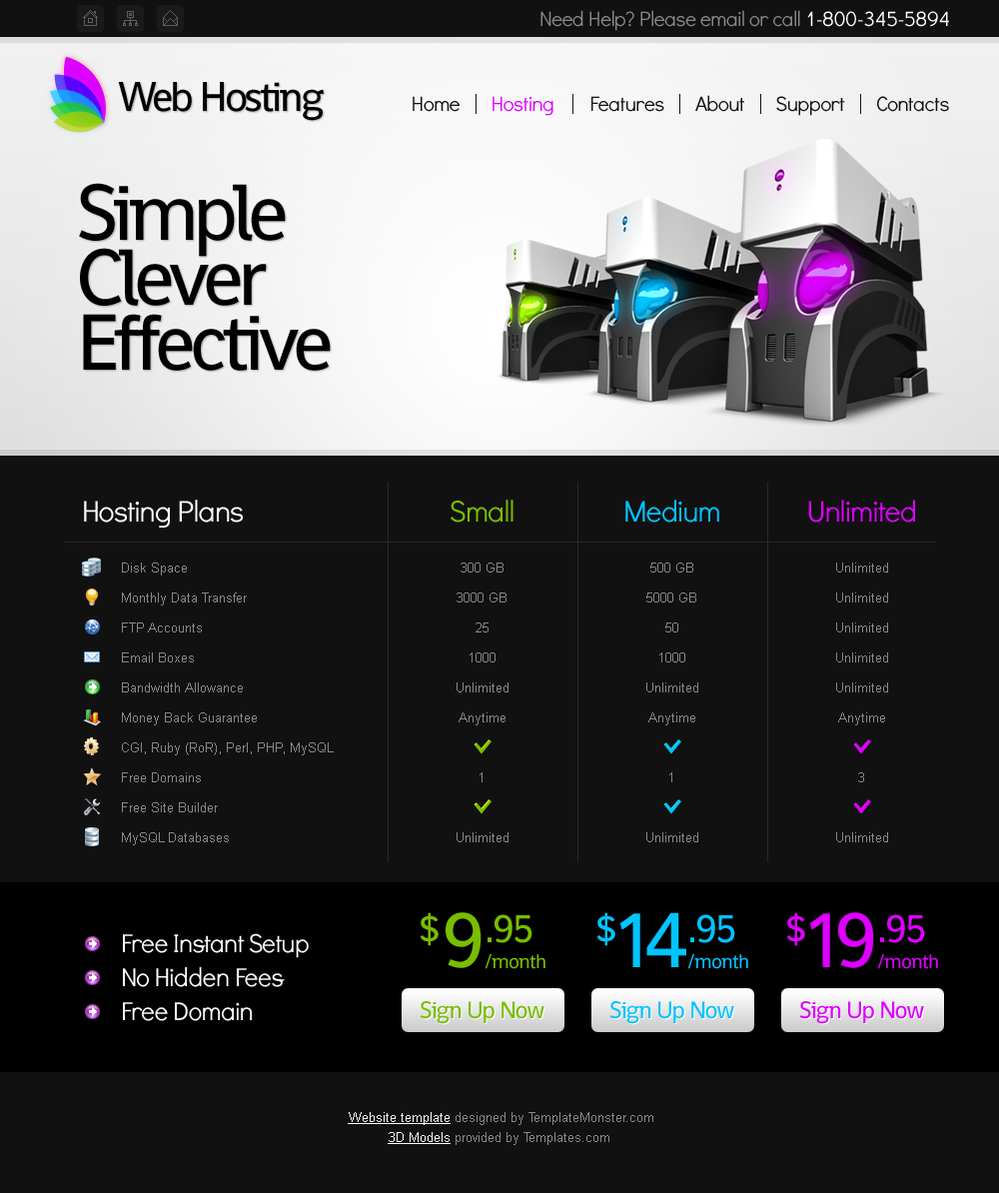
<style>
.page{position:relative;width:999px;height:1193px;background:#111111}
.page>*{position:absolute;margin:0}
.t1{font:21px "DidactGothic";letter-spacing:-0.025em;color:#888888}
.t2{font:21px "DidactGothic";letter-spacing:-0.025em;color:#ffffff}
.t3{font:42px "Shanti";letter-spacing:-0.075em;color:#000000}
.t4{font:21px "DidactGothic";letter-spacing:-0.025em;color:#111111}
.t5{font:21px "DidactGothic";letter-spacing:-0.025em;color:#dd00ff}
.t6{font:79.9px/65px "Shanti";letter-spacing:-0.075em;color:#000000}
.t7{font:30px "DidactGothic";letter-spacing:-0.025em;color:#ffffff}
.t8{font:30px "DidactGothic";letter-spacing:-0.025em;color:#79bd00}
.t9{font:30px "DidactGothic";letter-spacing:-0.025em;color:#01c3fe}
.t10{font:30px "DidactGothic";letter-spacing:-0.025em;color:#dd00ff}
.t11{font:13px/30px "ArialMT";color:#888888}
.t12{font:40px "Shanti";letter-spacing:-0.05em;color:#79bd00}
.t13{font:79.9px "Shanti";letter-spacing:-0.05em;color:#79bd00}
.t14{font:40px "Shanti";letter-spacing:-0.05em;color:#01c3fe}
.t15{font:79.9px "Shanti";letter-spacing:-0.05em;color:#01c3fe}
.t16{font:40px "Shanti";letter-spacing:-0.05em;color:#dd00ff}
.t17{font:79.9px "Shanti";letter-spacing:-0.05em;color:#dd00ff}
.t18{font:26px/34px "DidactGothic";letter-spacing:-0.025em;color:#ffffff}
.t19{font:20px "Shanti";letter-spacing:-0.05em;color:#79bd00}
.t20{font:20px "Shanti";letter-spacing:-0.05em;color:#01c3fe}
.t21{font:20px "Shanti";letter-spacing:-0.05em;color:#dd00ff}
.t22{font:24px "Shanti";letter-spacing:-0.05em;color:#79bd00}
.t23{font:24px "Shanti";letter-spacing:-0.05em;color:#01c3fe}
.t24{font:24px "Shanti";letter-spacing:-0.05em;color:#dd00ff}
.t25{font:13px/20px "ArialMT";color:#888888}
.t26{font:13px/20px "ArialMT";color:#ffffff}
.t27{font:13px/20px "ArialMT";color:#ffffff;text-decoration:underline}
</style>
<div class="page">
<p class="t1" style="left:541px;top:10px;width:408px;height:21px">Need Help? Please email or call <span class="t2">1-800-345-5894</span></p>
<p class="t3" style="left:118px;top:82px;width:206px;height:39px">Web Hosting</p>
<p class="t4" style="left:413px;top:95px;width:536px;height:21px">Home       <span class="t5">Hosting</span>        Features       About       Support       Contacts</p>
<p class="t6" style="left:79px;top:183px;width:252px;height:188px">Simple<br>Clever<br>Effective</p>
<p class="t7" style="left:84px;top:500px;width:159px;height:28px">Hosting Plans</p>
<p class="t8" style="left:451px;top:500px;width:63px;height:23px">Small</p>
<p class="t9" style="left:626px;top:500px;width:94px;height:23px">Medium</p>
<p class="t10" style="left:808px;top:500px;width:107px;height:23px">Unlimited</p>
<p class="t11" style="left:122px;top:563px;width:212px;height:282px">Disk Space<br>Monthly Data Transfer<br>FTP Accounts<br>Email Boxes<br>Bandwidth Allowance<br>Money Back Guarantee<br>CGI, Ruby (RoR), Perl, PHP, MySQL<br>Free Domains<br>Free Site Builder<br>MySQL Databases</p>
<p class="t11" style="left:457px;top:563px;width:52px;height:279px;text-align:center">300 GB<br>3000 GB<br>25<br>1000<br>Unlimited<br>Anytime<br><br>1<br><br>Unlimited</p>
<p class="t11" style="left:647px;top:563px;width:52px;height:279px;text-align:center">500 GB<br>5000 GB<br>50<br>1000<br>Unlimited<br>Anytime<br><br>1<br><br>Unlimited</p>
<p class="t11" style="left:836px;top:563px;width:52px;height:279px;text-align:center">Unlimited<br>Unlimited<br>Unlimited<br>Unlimited<br>Unlimited<br>Anytime<br><br>3<br><br>Unlimited</p>
<p class="t12" style="left:420px;top:912px;width:19px;height:34px">$</p>
<p class="t13" style="left:446px;top:912px;width:36px;height:56px">9</p>
<p class="t12" style="left:488px;top:914px;width:45px;height:29px">.95</p>
<p class="t14" style="left:597px;top:912px;width:19px;height:34px">$</p>
<p class="t15" style="left:620px;top:912px;width:67px;height:55px">14</p>
<p class="t14" style="left:691px;top:914px;width:45px;height:29px">.95</p>
<p class="t16" style="left:786px;top:912px;width:19px;height:34px">$</p>
<p class="t17" style="left:809px;top:912px;width:65px;height:56px">19</p>
<p class="t16" style="left:880px;top:914px;width:45px;height:29px">.95</p>
<p class="t18" style="left:123px;top:933px;width:186px;height:88px">Free Instant Setup<br>No Hidden Fees<br>Free Domain</p>
<p class="t19" style="left:485px;top:953px;width:61px;height:16px">/month</p>
<p class="t20" style="left:688px;top:953px;width:61px;height:16px">/month</p>
<p class="t21" style="left:877px;top:953px;width:61px;height:16px">/month</p>
<p class="t22" style="left:420px;top:1001px;width:125px;height:23px">Sign Up Now</p>
<p class="t23" style="left:610px;top:1001px;width:125px;height:23px">Sign Up Now</p>
<p class="t24" style="left:799px;top:1001px;width:125px;height:23px">Sign Up Now</p>
<p class="t25" style="left:348px;top:1112px;width:306px;height:33px;text-align:center"><span class="t26"> </span><span class="t27">Website template</span> designed by TemplateMonster.com<br><span class="t27">3D Models</span> provided by Templates.com</p>
</div>
